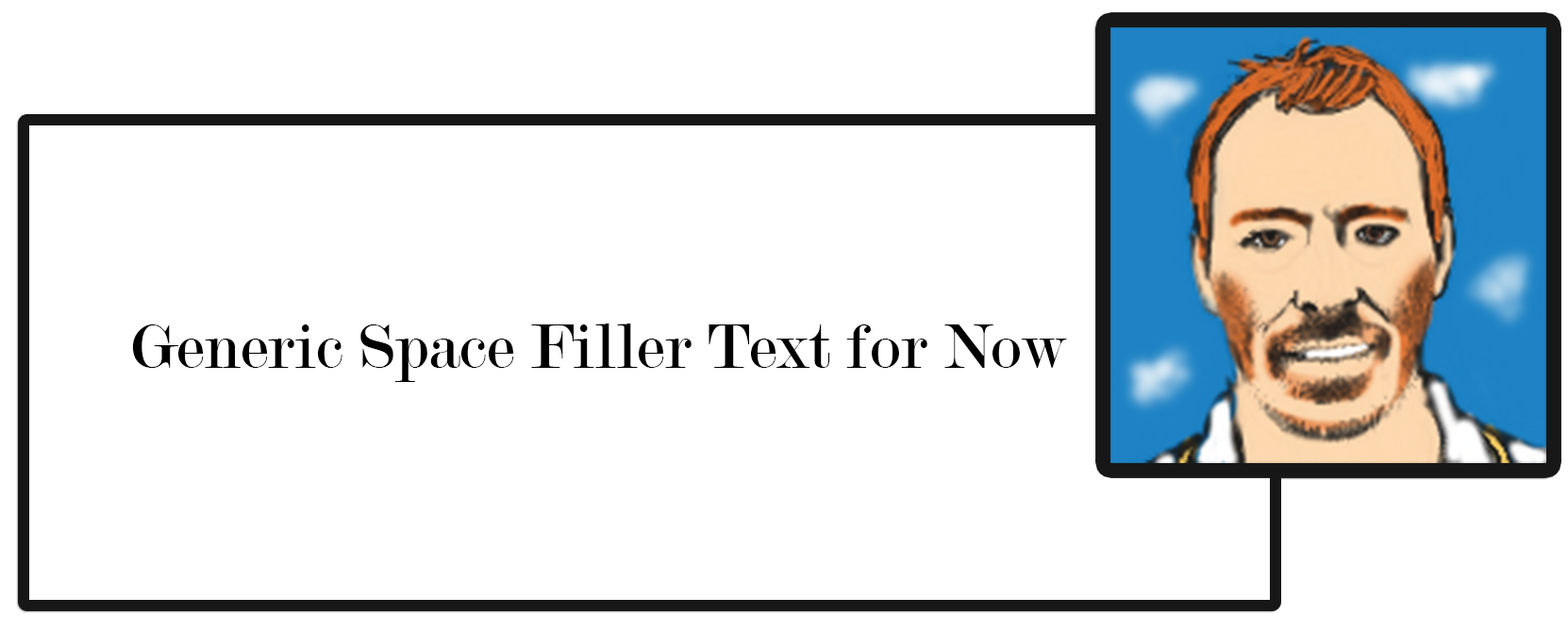
<style>
.page{position:relative;width:1568px;height:631px;background:#ffffff}
.page>*{position:absolute;margin:0}
.t1{font:67.9px "Modern-Regular";color:#000000}
</style>
<div class="page">
<p class="t1" style="left:132px;top:324px;width:935px;height:58px">Generic Space Filler Text for Now</p>
</div>
